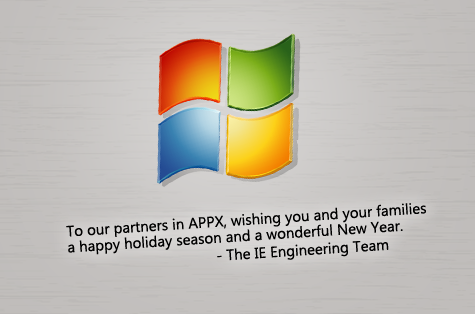
<style>
.page{position:relative;width:475px;height:314px}
.page>*{position:absolute;margin:0}
.t1{font:15px/16px "SegoeUI";color:#000000}
.t2{font:15px/18px "SegoeUI";color:#000000}
</style>
<div class="page">
<p class="t1" style="left:66px;top:203px;width:360px;height:58px;rotate:-4deg">To our partners in APPX, wishing you and your families <br>a happy holiday season and a wonderful New Year.<br><span class="t2">            - The IE Engineering Team</span></p>
</div>
